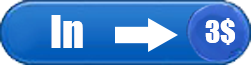
<style>
.page{position:relative;width:251px;height:65px}
.page>*{position:absolute;margin:0}
.t1{font:41.7px "Impact";color:#fefefe}
.t2{font:29.2px "Impact";color:#fefefe}
</style>
<div class="page">
<p class="t1" style="left:51px;top:15px;width:32px;height:33px">In</p>
<p class="t2" style="left:205px;top:18px;width:30px;height:27px">3$</p>
</div>
